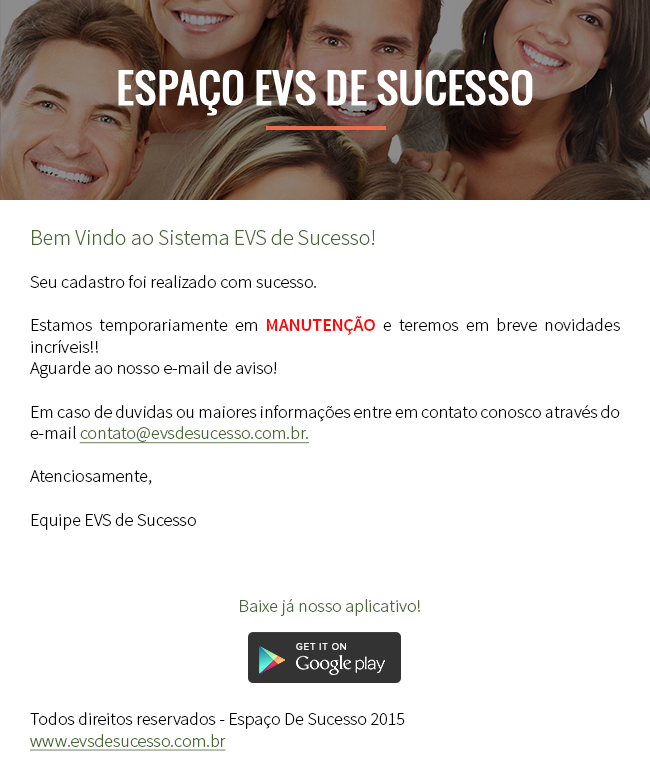
<style>
.page{position:relative;width:650px;height:780px;background:#ffffff}
.page>*{position:absolute;margin:0}
.t1{font:40px "Oswald-Regular";color:#ffffff;text-transform:uppercase;font-weight:bold}
.t2{font:18px "SourceSansPro-Light";color:#000000}
.t3{font:22px "SourceSansPro-Light";color:#476831}
.t4{font:18px "SourceSansPro-Semibold";color:#fa0a0a}
.t5{font:18px "SourceSansPro-Light";color:#476831;text-decoration:underline}
.t6{font:18px "SourceSansPro-Light";color:#476831}
</style>
<div class="page">
<p class="t1" style="left:118px;top:70px;width:415px;height:46px">ESPAÇO EVS DE SUCESSO</p>
<p class="t2" style="left:30px;top:229px;width:590px;height:301px;text-align:justify"><span class="t3">Bem Vindo ao Sistema EVS de Sucesso!<br></span><br>Seu cadastro foi realizado com sucesso.<br><br>Estamos temporariamente em <span class="t4">MANUTENÇÃO</span> e teremos em breve novidades incríveis!!<br>Aguarde ao nosso e-mail de aviso!<br><br>Em caso de duvidas ou maiores informações entre em contato conosco através do e-mail <span class="t5">contato@evsdesucesso.com.br.<br></span><br>Atenciosamente,<br><br>Equipe EVS de Sucesso</p>
<p class="t6" style="left:240px;top:599px;width:180px;height:17px">Baixe já nosso aplicativo!</p>
<p class="t2" style="left:30px;top:712px;width:375px;height:39px;text-align:justify">Todos direitos reservados - Espaço De Sucesso 2015<br><span class="t5">www.evsdesucesso.com.br</span></p>
</div>
